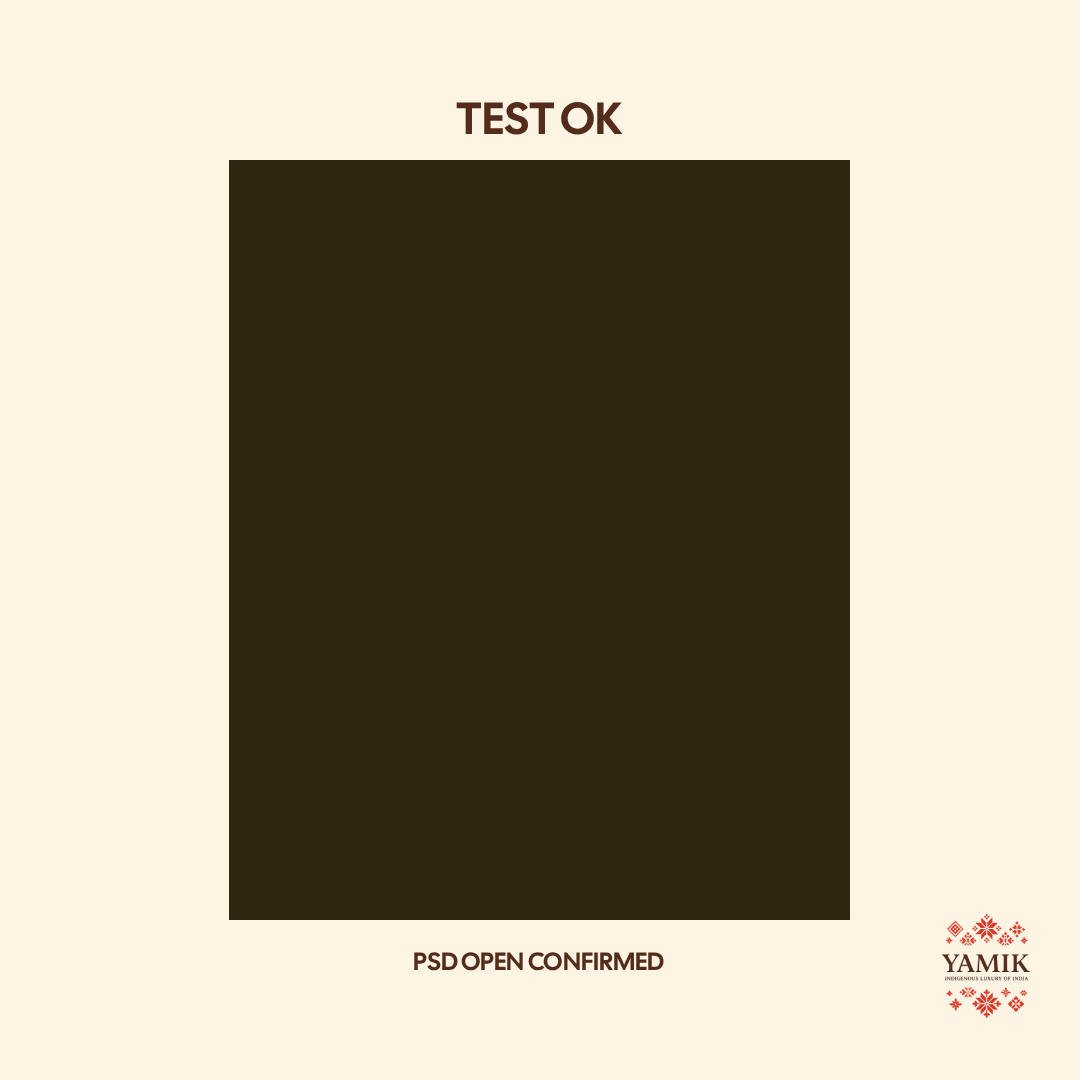
<style>
.page{position:relative;width:1080px;height:1080px;background:#fdf4e3}
.page>*{position:absolute;margin:0}
.t1{font:45px "CalSans-Regular";color:#542c1c}
.t2{font:25px "CalSans-Regular";color:#542c1c}
</style>
<div class="page">
<p class="t1" style="left:456px;top:101px;width:167px;height:34px">TEST OK</p>
<p class="t2" style="left:414px;top:952px;width:250px;height:19px">PSD OPEN CONFIRMED</p>
</div>
